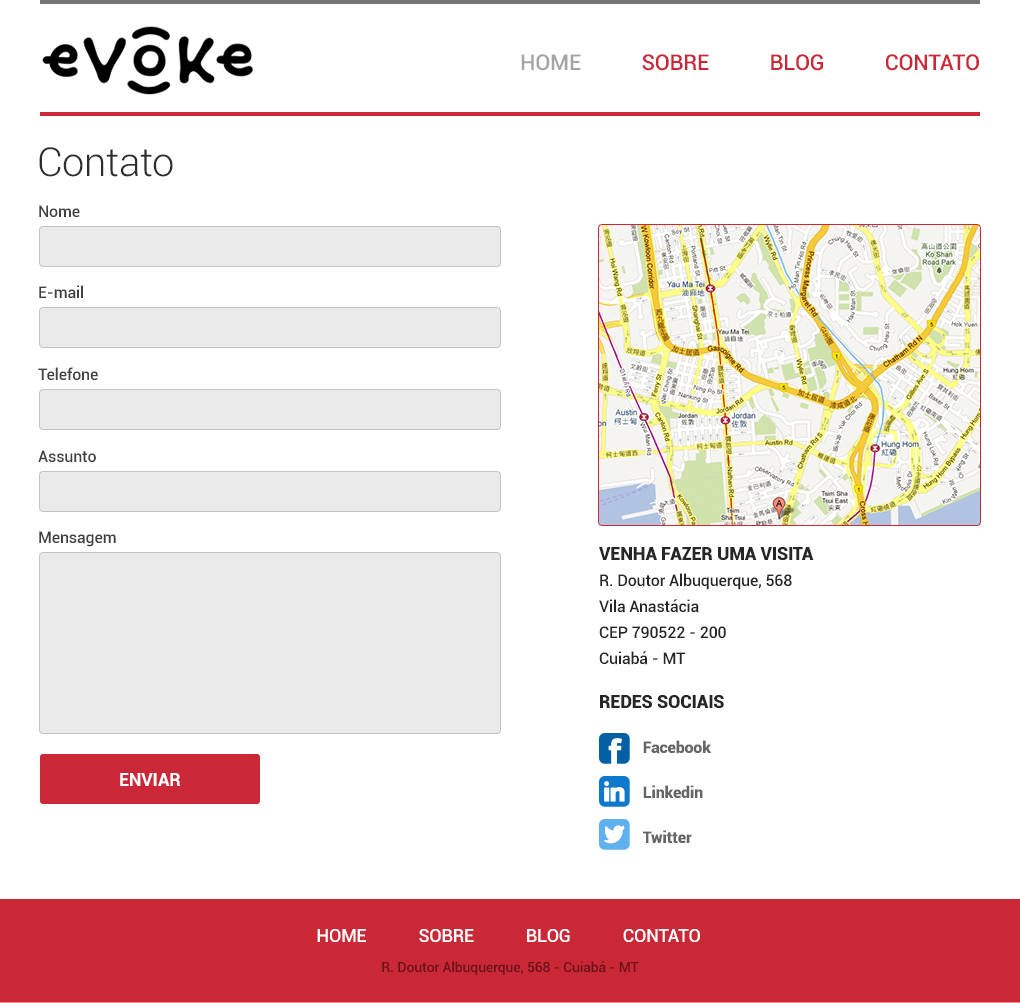
<style>
.page{position:relative;width:1020px;height:1003px;background:#ffffff}
.page>*{position:absolute;margin:0}
.t1{font:22px "Roboto-Medium";letter-spacing:-0.01em;color:#cb2837;text-transform:uppercase}
.t2{font:22px "Roboto-Medium";letter-spacing:-0.01em;color:#a4a4a4;text-transform:uppercase}
.t3{font:40px "Roboto-Light";letter-spacing:-0.01em;color:#2d2d2d}
.t4{font:16px "Roboto-Medium";letter-spacing:-0.01em;color:#414141}
.t5{font:16px/26px "Roboto-Medium";letter-spacing:-0.01em;color:#262626}
.t6{font:18px/26px "Roboto-Black";letter-spacing:-0.01em;color:#262626;text-transform:uppercase}
.t7{font:16px/45px "Roboto-Black";letter-spacing:-0.01em;color:#666464}
.t8{font:18px "Roboto-Bold";letter-spacing:-0.01em;color:#ffffff;text-transform:uppercase}
.t9{font:18px "Roboto-Medium";letter-spacing:-0.01em;color:#ffffff;text-transform:uppercase}
.t10{font:14px "Roboto-Medium";letter-spacing:-0.01em;color:#69121a}
</style>
<div class="page">
<p class="t1" style="left:521px;top:54px;width:458px;height:17px"><span class="t2">Home</span> Sobre Blog Contato</p>
<p class="t3" style="left:39px;top:147px;width:134px;height:30px">Contato</p>
<p class="t4" style="left:39px;top:205px;width:41px;height:12px">Nome</p>
<p class="t4" style="left:39px;top:285px;width:44px;height:14px">E-mail</p>
<p class="t4" style="left:38px;top:367px;width:60px;height:13px">Telefone</p>
<p class="t4" style="left:38px;top:450px;width:58px;height:13px">Assunto</p>
<p class="t4" style="left:39px;top:531px;width:77px;height:16px">Mensagem</p>
<p class="t5" style="left:599px;top:547px;width:215px;height:118px"><span class="t6">Venha fazer uma visita<br></span>R. Doutor Albuquerque, 568 <br>Vila Anastácia<br>CEP 790522 - 200<br>Cuiabá - MT</p>
<p class="t7" style="left:600px;top:695px;width:124px;height:148px"><span class="t6">Redes sociais<br></span>   Facebook<br>   Linkedin<br>   Twitter</p>
<p class="t8" style="left:120px;top:773px;width:61px;height:13px">Enviar</p>
<p class="t9" style="left:317px;top:929px;width:383px;height:13px">Home Sobre Blog Contato</p>
<p class="t10" style="left:382px;top:961px;width:257px;height:14px">R. Doutor Albuquerque, 568 - Cuiabá - MT</p>
</div>
